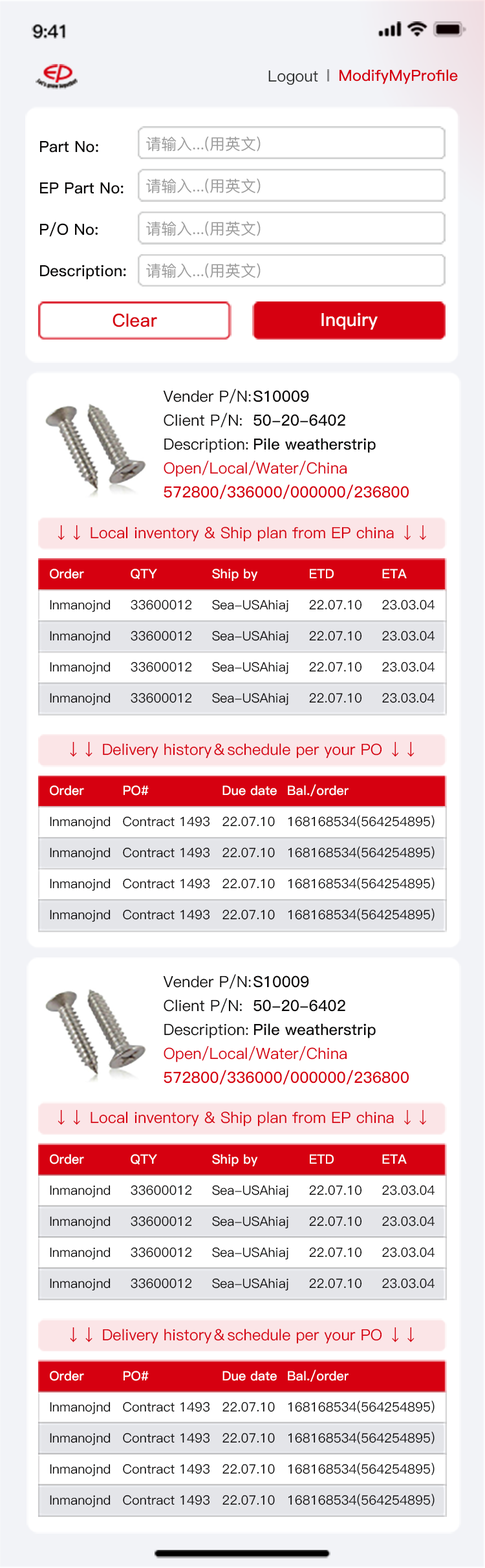
<style>
.page{position:relative;width:485px;height:1568px;background:#ffffff}
.page>*{position:absolute;margin:0}
.t1{font:15.5px "PingFang-SC-Medium";color:#2b2d2d}
.t2{font:15.5px "PingFang-SC-Bold";color:#d60010}
.t3{font:15.5px "PingFang-SC-Medium";color:#9b9b9b}
.t4{font:15.5px "PingFang-SC-Bold";color:#0b0a0a}
.t5{font:18.1px "PingFang-SC-Bold";color:#d60010}
.t6{font:18.1px "PingFang-SC-Bold";color:#ffffff}
.t7{font:15.5px "PingFang-SC-Medium";color:#0b0a0a}
.t8{font:15.5px "PingFang-SC-Medium";color:#d60010}
.t9{font:12.9px "PingFang-SC-Bold";color:#ffffff}
.t10{font:12.9px "PingFang-SC-Medium";color:#0b0a0a}
</style>
<div class="page">
<p class="t1" style="left:268px;top:70px;width:50px;height:15px">Logout</p>
<p class="t2" style="left:340px;top:69px;width:118px;height:15px">ModifyMyProfile</p>
<p class="t3" style="left:146px;top:136px;width:115px;height:15px">请输入...(用英文)</p>
<p class="t4" style="left:40px;top:141px;width:58px;height:12px">Part No:</p>
<p class="t4" style="left:40px;top:182px;width:84px;height:12px">EP Part No:</p>
<p class="t3" style="left:146px;top:179px;width:115px;height:14px">请输入...(用英文)</p>
<p class="t4" style="left:40px;top:222px;width:58px;height:15px">P/O No:</p>
<p class="t3" style="left:146px;top:221px;width:115px;height:15px">请输入...(用英文)</p>
<p class="t4" style="left:40px;top:265px;width:86px;height:14px">Description:</p>
<p class="t3" style="left:146px;top:263px;width:115px;height:15px">请输入...(用英文)</p>
<p class="t5" style="left:113px;top:313px;width:44px;height:14px">Clear</p>
<p class="t6" style="left:321px;top:312px;width:57px;height:18px">Inquiry</p>
<p class="t7" style="left:163px;top:389px;width:88px;height:15px">Vender P/N:</p>
<p class="t4" style="left:254px;top:390px;width:55px;height:12px">S10009</p>
<p class="t7" style="left:164px;top:413px;width:78px;height:15px">Client P/N:</p>
<p class="t4" style="left:254px;top:414px;width:91px;height:12px">50-20-6402</p>
<p class="t7" style="left:164px;top:438px;width:84px;height:15px">Description:</p>
<p class="t4" style="left:254px;top:438px;width:122px;height:15px">Pile weatherstrip</p>
<p class="t8" style="left:164px;top:461px;width:183px;height:16px">Open/Local/Water/China</p>
<p class="t2" style="left:164px;top:485px;width:245px;height:14px">572800/336000/000000/236800</p>
<p class="t8" style="left:58px;top:525px;width:368px;height:16px">↓↓ Local inventory &amp; Ship plan from EP china ↓↓</p>
<p class="t9" style="left:50px;top:569px;width:34px;height:10px">Order</p>
<p class="t9" style="left:131px;top:569px;width:26px;height:11px">QTY</p>
<p class="t9" style="left:212px;top:569px;width:46px;height:12px">Ship by</p>
<p class="t9" style="left:310px;top:569px;width:24px;height:9px">ETD</p>
<p class="t9" style="left:382px;top:569px;width:25px;height:9px">ETA</p>
<p class="t10" style="left:50px;top:600px;width:61px;height:13px">Inmanojnd</p>
<p class="t10" style="left:131px;top:600px;width:61px;height:10px">33600012</p>
<p class="t10" style="left:212px;top:600px;width:77px;height:13px">Sea-USAhiaj</p>
<p class="t10" style="left:309px;top:600px;width:53px;height:10px">22.07.10</p>
<p class="t10" style="left:382px;top:600px;width:53px;height:10px">23.03.04</p>
<p class="t10" style="left:50px;top:631px;width:61px;height:13px">Inmanojnd</p>
<p class="t10" style="left:131px;top:631px;width:61px;height:10px">33600012</p>
<p class="t10" style="left:212px;top:631px;width:77px;height:13px">Sea-USAhiaj</p>
<p class="t10" style="left:309px;top:631px;width:53px;height:10px">22.07.10</p>
<p class="t10" style="left:382px;top:631px;width:53px;height:10px">23.03.04</p>
<p class="t10" style="left:50px;top:662px;width:61px;height:13px">Inmanojnd</p>
<p class="t10" style="left:131px;top:662px;width:61px;height:10px">33600012</p>
<p class="t10" style="left:212px;top:662px;width:77px;height:13px">Sea-USAhiaj</p>
<p class="t10" style="left:309px;top:662px;width:53px;height:10px">22.07.10</p>
<p class="t10" style="left:382px;top:662px;width:53px;height:10px">23.03.04</p>
<p class="t10" style="left:50px;top:693px;width:61px;height:13px">Inmanojnd</p>
<p class="t10" style="left:131px;top:693px;width:61px;height:10px">33600012</p>
<p class="t10" style="left:212px;top:693px;width:77px;height:13px">Sea-USAhiaj</p>
<p class="t10" style="left:309px;top:693px;width:53px;height:10px">22.07.10</p>
<p class="t10" style="left:382px;top:693px;width:53px;height:10px">23.03.04</p>
<p class="t8" style="left:70px;top:741px;width:345px;height:17px">↓↓ Delivery history＆schedule per your PO ↓↓</p>
<p class="t9" style="left:50px;top:785px;width:34px;height:11px">Order</p>
<p class="t9" style="left:124px;top:785px;width:25px;height:11px">PO#</p>
<p class="t9" style="left:223px;top:785px;width:54px;height:11px">Due date</p>
<p class="t9" style="left:288px;top:784px;width:61px;height:12px">Bal./order</p>
<p class="t10" style="left:50px;top:816px;width:61px;height:13px">Inmanojnd</p>
<p class="t10" style="left:123px;top:816px;width:87px;height:11px">Contract 1493</p>
<p class="t10" style="left:223px;top:816px;width:52px;height:11px">22.07.10</p>
<p class="t10" style="left:288px;top:815px;width:147px;height:13px">168168534(564254895)</p>
<p class="t10" style="left:50px;top:847px;width:61px;height:13px">Inmanojnd</p>
<p class="t10" style="left:123px;top:847px;width:87px;height:11px">Contract 1493</p>
<p class="t10" style="left:223px;top:847px;width:52px;height:11px">22.07.10</p>
<p class="t10" style="left:288px;top:846px;width:147px;height:13px">168168534(564254895)</p>
<p class="t10" style="left:50px;top:878px;width:61px;height:13px">Inmanojnd</p>
<p class="t10" style="left:123px;top:878px;width:87px;height:11px">Contract 1493</p>
<p class="t10" style="left:223px;top:878px;width:52px;height:11px">22.07.10</p>
<p class="t10" style="left:288px;top:877px;width:147px;height:13px">168168534(564254895)</p>
<p class="t10" style="left:50px;top:909px;width:61px;height:13px">Inmanojnd</p>
<p class="t10" style="left:123px;top:909px;width:87px;height:11px">Contract 1493</p>
<p class="t10" style="left:223px;top:909px;width:52px;height:11px">22.07.10</p>
<p class="t10" style="left:288px;top:908px;width:147px;height:13px">168168534(564254895)</p>
<p class="t7" style="left:163px;top:974px;width:88px;height:15px">Vender P/N:</p>
<p class="t4" style="left:254px;top:975px;width:55px;height:13px">S10009</p>
<p class="t7" style="left:164px;top:998px;width:78px;height:15px">Client P/N:</p>
<p class="t4" style="left:254px;top:999px;width:91px;height:13px">50-20-6402</p>
<p class="t7" style="left:164px;top:1023px;width:84px;height:15px">Description:</p>
<p class="t4" style="left:254px;top:1023px;width:122px;height:15px">Pile weatherstrip</p>
<p class="t8" style="left:164px;top:1046px;width:183px;height:16px">Open/Local/Water/China</p>
<p class="t2" style="left:164px;top:1070px;width:245px;height:15px">572800/336000/000000/236800</p>
<p class="t8" style="left:58px;top:1109px;width:368px;height:17px">↓↓ Local inventory &amp; Ship plan from EP china ↓↓</p>
<p class="t9" style="left:50px;top:1154px;width:34px;height:10px">Order</p>
<p class="t9" style="left:131px;top:1154px;width:26px;height:11px">QTY</p>
<p class="t9" style="left:212px;top:1154px;width:46px;height:12px">Ship by</p>
<p class="t9" style="left:310px;top:1154px;width:24px;height:10px">ETD</p>
<p class="t9" style="left:382px;top:1154px;width:25px;height:10px">ETA</p>
<p class="t10" style="left:50px;top:1185px;width:61px;height:13px">Inmanojnd</p>
<p class="t10" style="left:131px;top:1185px;width:61px;height:10px">33600012</p>
<p class="t10" style="left:212px;top:1185px;width:77px;height:13px">Sea-USAhiaj</p>
<p class="t10" style="left:309px;top:1185px;width:53px;height:10px">22.07.10</p>
<p class="t10" style="left:382px;top:1185px;width:53px;height:10px">23.03.04</p>
<p class="t10" style="left:50px;top:1216px;width:61px;height:13px">Inmanojnd</p>
<p class="t10" style="left:131px;top:1216px;width:61px;height:10px">33600012</p>
<p class="t10" style="left:212px;top:1216px;width:77px;height:13px">Sea-USAhiaj</p>
<p class="t10" style="left:309px;top:1216px;width:53px;height:10px">22.07.10</p>
<p class="t10" style="left:382px;top:1216px;width:53px;height:10px">23.03.04</p>
<p class="t10" style="left:50px;top:1247px;width:61px;height:13px">Inmanojnd</p>
<p class="t10" style="left:131px;top:1247px;width:61px;height:11px">33600012</p>
<p class="t10" style="left:212px;top:1247px;width:77px;height:13px">Sea-USAhiaj</p>
<p class="t10" style="left:309px;top:1247px;width:53px;height:11px">22.07.10</p>
<p class="t10" style="left:382px;top:1247px;width:53px;height:11px">23.03.04</p>
<p class="t10" style="left:50px;top:1278px;width:61px;height:13px">Inmanojnd</p>
<p class="t10" style="left:131px;top:1278px;width:61px;height:11px">33600012</p>
<p class="t10" style="left:212px;top:1278px;width:77px;height:13px">Sea-USAhiaj</p>
<p class="t10" style="left:309px;top:1278px;width:53px;height:11px">22.07.10</p>
<p class="t10" style="left:382px;top:1278px;width:53px;height:11px">23.03.04</p>
<p class="t8" style="left:70px;top:1327px;width:345px;height:17px">↓↓ Delivery history＆schedule per your PO ↓↓</p>
<p class="t9" style="left:50px;top:1371px;width:34px;height:10px">Order</p>
<p class="t9" style="left:124px;top:1371px;width:25px;height:10px">PO#</p>
<p class="t9" style="left:223px;top:1371px;width:54px;height:10px">Due date</p>
<p class="t9" style="left:288px;top:1369px;width:61px;height:13px">Bal./order</p>
<p class="t10" style="left:50px;top:1402px;width:61px;height:13px">Inmanojnd</p>
<p class="t10" style="left:123px;top:1402px;width:87px;height:10px">Contract 1493</p>
<p class="t10" style="left:223px;top:1402px;width:52px;height:10px">22.07.10</p>
<p class="t10" style="left:288px;top:1400px;width:147px;height:13px">168168534(564254895)</p>
<p class="t10" style="left:50px;top:1433px;width:61px;height:13px">Inmanojnd</p>
<p class="t10" style="left:123px;top:1433px;width:87px;height:10px">Contract 1493</p>
<p class="t10" style="left:223px;top:1433px;width:52px;height:10px">22.07.10</p>
<p class="t10" style="left:288px;top:1432px;width:147px;height:12px">168168534(564254895)</p>
<p class="t10" style="left:50px;top:1464px;width:61px;height:13px">Inmanojnd</p>
<p class="t10" style="left:123px;top:1464px;width:87px;height:10px">Contract 1493</p>
<p class="t10" style="left:223px;top:1464px;width:52px;height:10px">22.07.10</p>
<p class="t10" style="left:288px;top:1463px;width:147px;height:12px">168168534(564254895)</p>
<p class="t10" style="left:288px;top:1494px;width:147px;height:13px">168168534(564254895)</p>
<p class="t10" style="left:50px;top:1495px;width:61px;height:13px">Inmanojnd</p>
<p class="t10" style="left:123px;top:1495px;width:87px;height:10px">Contract 1493</p>
<p class="t10" style="left:223px;top:1495px;width:52px;height:10px">22.07.10</p>
</div>
